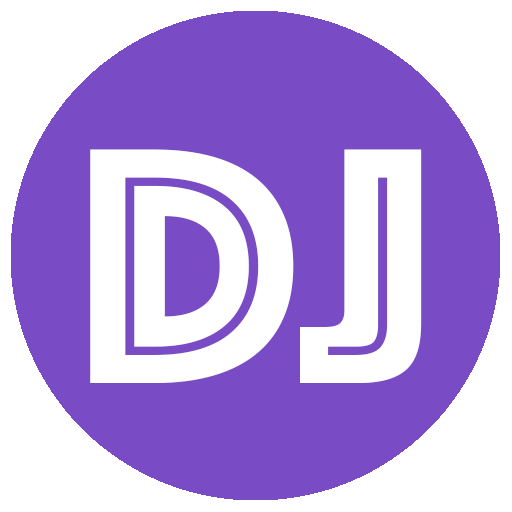
<style>
.page{position:relative;width:512px;height:512px;background:#794bc4}
.page>*{position:absolute;margin:0}
.t1{font:350px "Phosphate-Inline";color:#ffffff}
</style>
<div class="page">
<p class="t1" style="left:90px;top:149px;width:332px;height:234px">dj</p>
</div>
